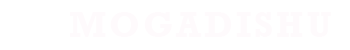
<style>
.page{position:relative;width:350px;height:50px;background:#ffffff}
.page>*{position:absolute;margin:0}
.t1{font:36px "Rockwell-Bold";letter-spacing:0.08em;color:#fefafc}
</style>
<div class="page">
<p class="t1" style="left:70px;top:12px;width:261px;height:25px">MOGADISHU</p>
</div>
